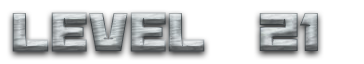
<style>
.page{position:relative;width:364px;height:64px;background:#ffffff}
.page>*{position:absolute;margin:0}
.t1{font:60px "BananaBrick"}
</style>
<div class="page">
<p class="t1" style="left:12px;top:12px;width:306px;height:40px">Level  21</p>
</div>
